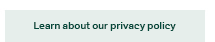
<style>
.page{position:relative;width:215px;height:42px;background:#e6eeeb}
.page>*{position:absolute;margin:0}
.t1{font:10px "AktivGrotesk-Medium";letter-spacing:0.005em;color:#03483a}
</style>
<div class="page">
<p class="t1" style="left:34px;top:22px;width:142px;height:9px">Learn about our privacy policy</p>
</div>
